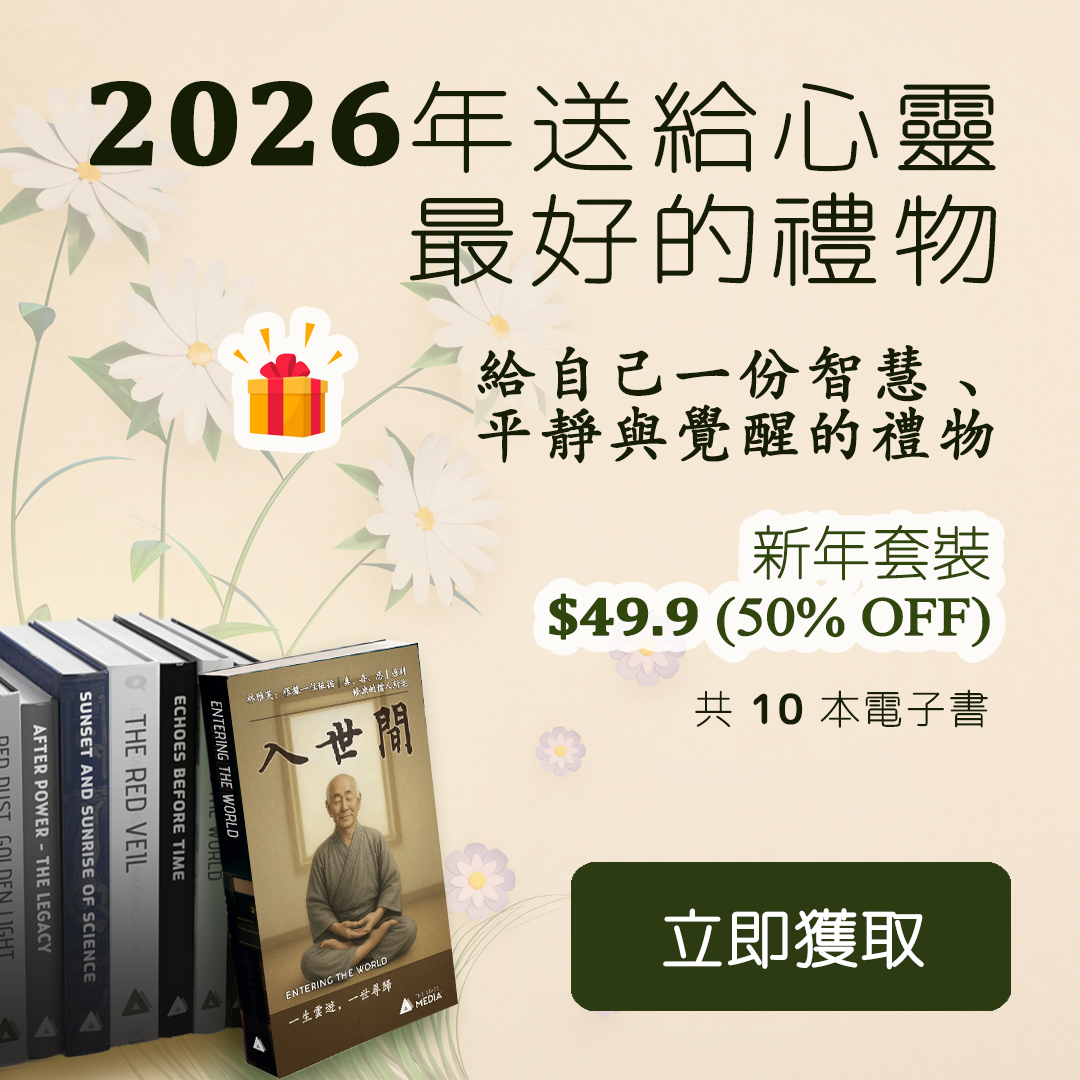
<style>
.page{position:relative;width:1080px;height:1080px}
.page>*{position:absolute;margin:0}
.t1{font:100px/113px "RoundedMplus1c-Thin";letter-spacing:0.075em;color:#151e05;font-weight:bold;scale:1.1 1}
.t2{font:120px/113px "Cambria-Bold";color:#151e05;font-weight:bold;scale:1.08 1}
.t3{font:60px/60px "CN-Khai3.0";letter-spacing:0.075em;color:#151e05;font-weight:bold}
.t4{font:54px/60px "TimesNewRomanPSMT";letter-spacing:-0.025em;color:#31460c;font-weight:bold;scale:1.11 1}
.t5{font:60px/60px "RoundedMplus1c-Thin";letter-spacing:-0.025em;color:#31460c;font-weight:bold}
.t6{font:54px/60px "Cambria-Bold";letter-spacing:-0.025em;color:#31460c;font-weight:bold;scale:1.11 1}
.t7{font:40px "RoundedMplus1c-Thin";letter-spacing:0.05em;color:#151e05;font-weight:bold}
.t8{font:40px "RoundedMplus1c-Medium";letter-spacing:0.05em;color:#151e05;font-weight:bold}
.t9{font:65px "RoundedMplus1c-Light";color:#ffffff;font-weight:bold}
</style>
<div class="page">
<p class="t1" style="left:90px;top:80px;width:906px;height:207px;text-align:right"><span class="t2">2026</span>年送給心靈<br>最好的禮物</p>
<p class="t3" style="left:477px;top:345px;width:517px;height:119px;text-align:right">給自己一份智慧、<br>平靜與覺醒的禮物</p>
<p class="t4" style="left:549px;top:525px;width:441px;height:123px;text-align:right"><span class="t5">新年套裝<br> </span><span class="t6">$49.9</span> (50% OFF)</p>
<p class="t7" style="left:695px;top:689px;width:293px;height:39px">共 <span class="t8">10</span> 本電子書</p>
<p class="t9" style="left:663px;top:908px;width:261px;height:62px">立即獲取</p>
</div>
